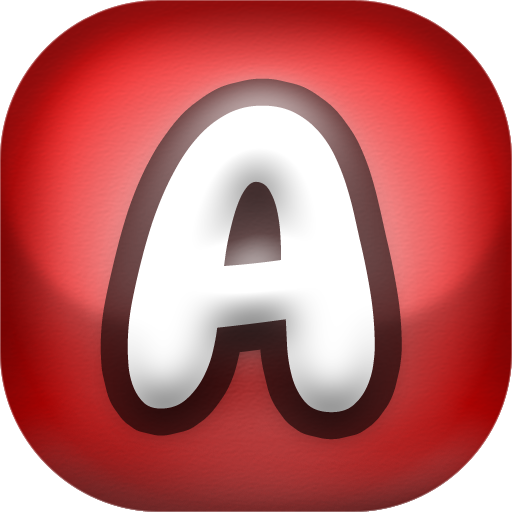
<style>
.page{position:relative;width:512px;height:512px}
.page>*{position:absolute;margin:0}
.t1{font:413.7px "Chewy";color:#ffffff;scale:1.2 1}
</style>
<div class="page">
<p class="t1" style="left:127px;top:105px;width:248px;height:308px">A</p>
</div>
